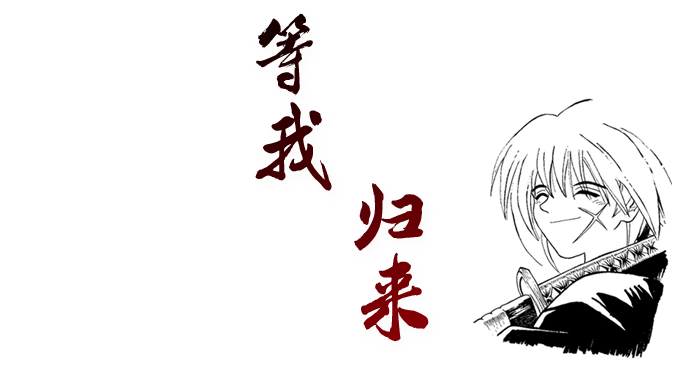
<style>
.page{position:relative;width:700px;height:370px;background:#ffffff}
.page>*{position:absolute;margin:0}
.t1{font:99.2px "ÊéÌå·»¹ùÄ­Èô×ÖÌå";color:#1e0001}
.t2{font:99.2px "ÊéÌå·»¹ùÄ­Èô×ÖÌå";color:#3a0002}
.t3{font:99.2px "ÊéÌå·»¹ùÄ­Èô×ÖÌå";color:#630004}
.t4{font:99.2px "ÊéÌå·»¹ùÄ­Èô×ÖÌå";color:#7a0005}
</style>
<div class="page">
<p class="t1" style="left:256px;top:13px;width:57px;height:83px">等</p>
<p class="t2" style="left:255px;top:102px;width:77px;height:89px">我</p>
<p class="t3" style="left:354px;top:183px;width:70px;height:68px">归</p>
<p class="t4" style="left:361px;top:252px;width:68px;height:90px">来</p>
</div>
